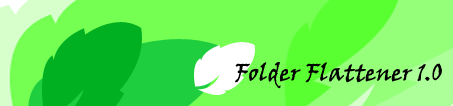
<style>
.page{position:relative;width:453px;height:106px;background:#74ff52}
.page>*{position:absolute;margin:0}
.t1{font:24px "VinerHandITC";color:#000000}
</style>
<div class="page">
<p class="t1" style="left:235px;top:62px;width:207px;height:27px">Folder Flattener 1.0</p>
</div>
